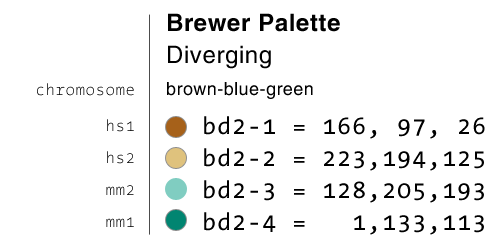
<style>
.page{position:relative;width:500px;height:245px;background:#ffffff}
.page>*{position:absolute;margin:0}
.t1{font:18px/32px "HelveticaLT";letter-spacing:0.025em;color:#000000}
.t2{font:24px/32px "HelveticaLT-Bold";letter-spacing:0.025em;color:#000000}
.t3{font:24px/32px "HelveticaLT";letter-spacing:0.025em;color:#000000}
.t4{font:16px/32px "TheSansMono-ExtraLight";letter-spacing:0.025em}
.t5{font:24px/32px "TheSansMono-Plain";letter-spacing:0.025em;color:#000000}
</style>
<div class="page">
<p class="t1" style="left:167px;top:13px;width:173px;height:86px"><span class="t2">Brewer Palette<br></span><span class="t3">Diverging</span><br>brown-blue-green</p>
<p class="t4" style="left:37px;top:83px;width:97px;height:144px;text-align:right">chromosome<br>hs1<br>hs2<br>mm2<br>mm1</p>
<p class="t5" style="left:204px;top:116px;width:281px;height:119px">bd2-1 = 166, 97, 26<br>bd2-2 = 223,194,125<br>bd2-3 = 128,205,193<br>bd2-4 =   1,133,113</p>
</div>
